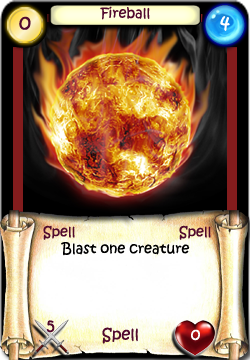
<style>
.page{position:relative;width:250px;height:360px}
.page>*{position:absolute;margin:0}
.t1{font:14px "KristenITC-Regular";color:#51092d}
.t2{font:20px "KristenITC-Regular";color:#51092d}
.t3{font:20px "KristenITC-Regular";color:#ffffff}
.t4{font:14px "KristenITC-Regular";color:#000000}
.t5{font:16px "KristenITC-Regular";color:#51092d}
.t6{font:16px "KristenITC-Regular";color:#fefefe}
</style>
<div class="page">
<p class="t1" style="left:100px;top:6px;width:50px;height:14px">Fireball</p>
<p class="t2" style="left:19px;top:16px;width:12px;height:14px">0</p>
<p class="t3" style="left:220px;top:16px;width:10px;height:15px">4</p>
<p class="t1" style="left:43px;top:225px;width:32px;height:15px">Spell</p>
<p class="t1" style="left:179px;top:225px;width:32px;height:15px">Spell</p>
<p class="t4" style="left:61px;top:242px;width:129px;height:14px">Blast one creature</p>
<p class="t5" style="left:46px;top:320px;width:9px;height:13px">5</p>
<p class="t5" style="left:102px;top:327px;width:36px;height:17px">Spell</p>
<p class="t6" style="left:191px;top:329px;width:9px;height:12px">0</p>
</div>
